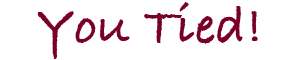
<style>
.page{position:relative;width:300px;height:60px;background:#ffffff}
.page>*{position:absolute;margin:0}
.t1{font:54px "BradleyHandITCTT-Bold";color:#7a0026}
</style>
<div class="page">
<p class="t1" style="left:37px;top:2px;width:221px;height:57px">You Tied!</p>
</div>
